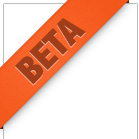
<style>
.page{position:relative;width:139px;height:139px;background:#ffffff}
.page>*{position:absolute;margin:0}
.t1{font:36px "HelveticaNeue-CondensedBlack";color:#9f3e18}
</style>
<div class="page">
<p class="t1" style="left:15px;top:18px;width:71px;height:67px;rotate:-45deg">BETA</p>
</div>
